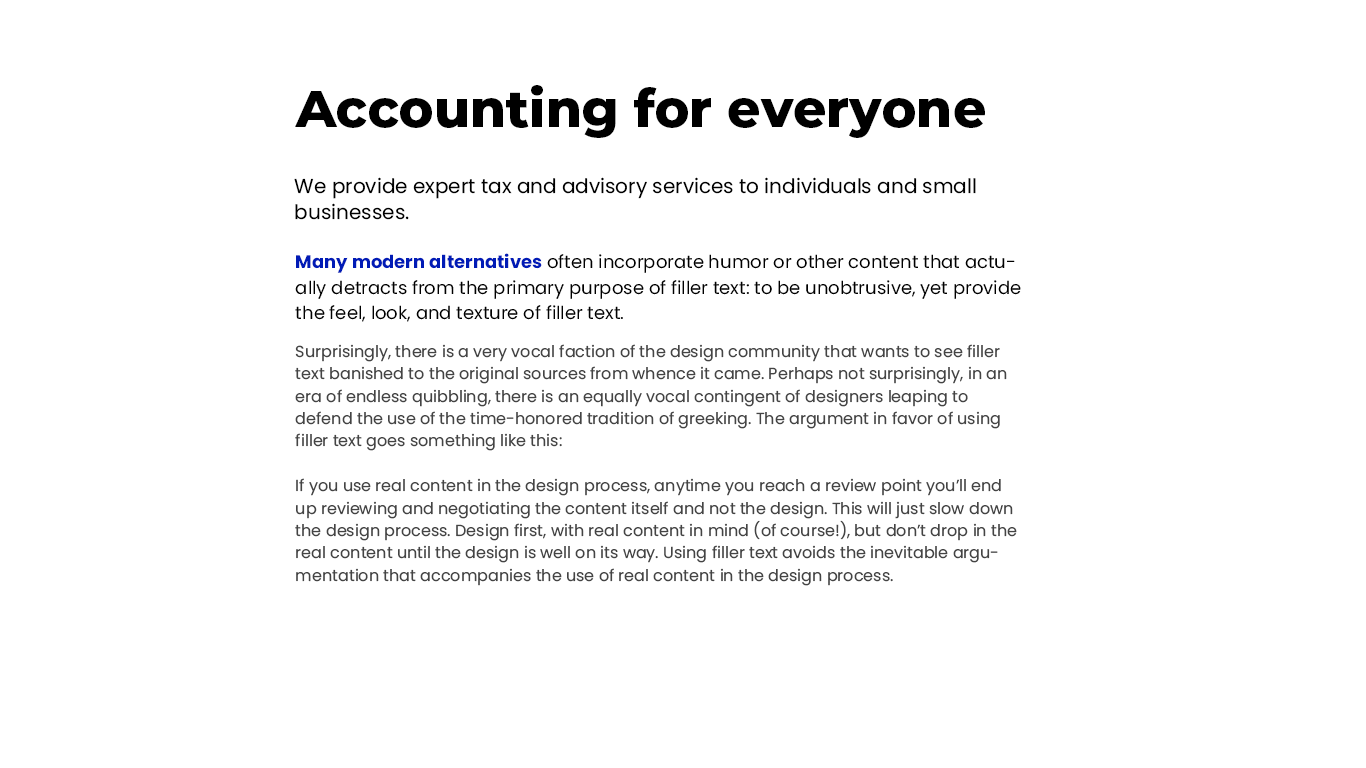
<style>
.page{position:relative;width:1366px;height:768px;background:#ffffff}
.page>*{position:absolute;margin:0}
.t1{font:52px "Montserrat-ExtraBold";color:#000000}
.t2{font:20px/26px "Poppins-Regular";color:#000000}
.t3{font:18px/25.2px "Poppins-Regular";color:#000000}
.t4{font:18px/25.2px "Poppins-Bold";color:#011bb6}
.t5{font:16px/22.4px "Poppins-Regular";color:#444444}
</style>
<div class="page">
<p class="t1" style="left:295px;top:85px;width:690px;height:53px">Accounting for everyone</p>
<p class="t2" style="left:294px;top:177px;width:682px;height:43px">We provide expert tax and advisory services to individuals and small businesses.</p>
<p class="t3" style="left:295px;top:253px;width:726px;height:69px"><span class="t4">Many modern alternatives</span> often incorporate humor or other content that actually detracts from the primary purpose of filler text: to be unobtrusive, yet provide the feel, look, and texture of filler text.</p>
<p class="t5" style="left:295px;top:344px;width:722px;height:242px">Surprisingly, there is a very vocal faction of the design community that wants to see filler text banished to the original sources from whence it came. Perhaps not surprisingly, in an era of endless quibbling, there is an equally vocal contingent of designers leaping to defend the use of the time-honored tradition of greeking. The argument in favor of using filler text goes something like this: <br><br>If you use real content in the design process, anytime you reach a review point you’ll end up reviewing and negotiating the content itself and not the design. This will just slow down the design process. Design first, with real content in mind (of course!), but don’t drop in the real content until the design is well on its way. Using filler text avoids the inevitable argumentation that accompanies the use of real content in the design process.</p>
</div>
